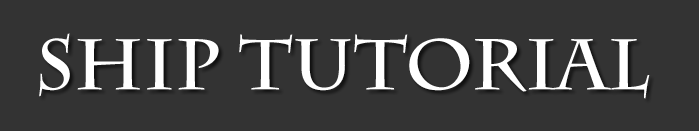
<style>
.page{position:relative;width:699px;height:131px;background:#333333}
.page>*{position:absolute;margin:0}
.t1{font:71.6px "CharlemagneStd-Bold";color:#ffffff}
</style>
<div class="page">
<p class="t1" style="left:39px;top:33px;width:611px;height:66px">ship tutorial</p>
</div>
